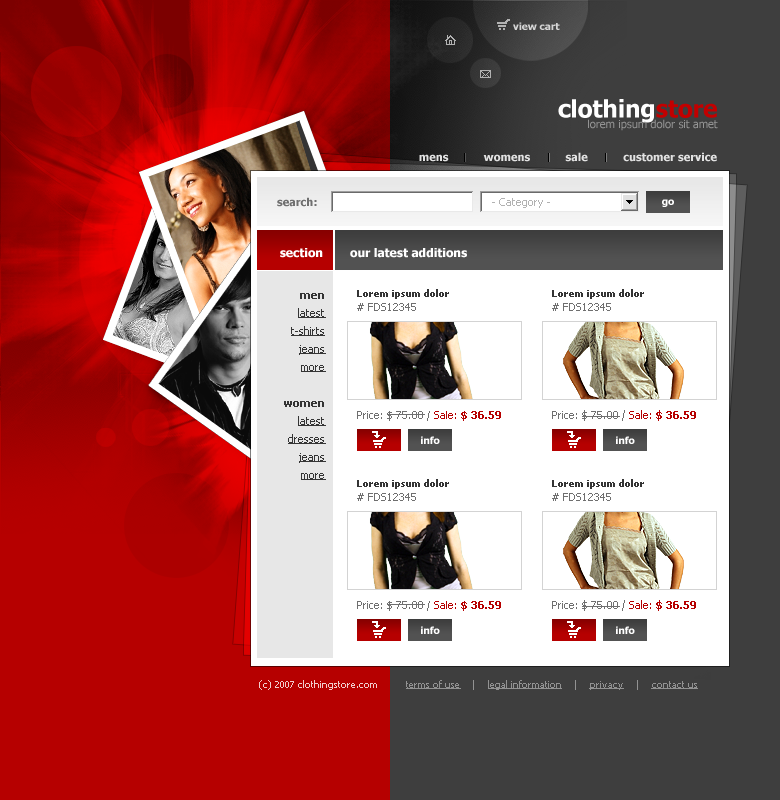
<style>
.page{position:relative;width:780px;height:800px;background:#ffffff}
.page>*{position:absolute;margin:0}
.t1{font:10px "Tahoma-Bold";color:#d5d5d5}
.t2{font:24px "Tahoma-Bold";color:#ffffff}
.t3{font:24px "Tahoma-Bold";color:#c20000}
.t4{font:11px "Tahoma";color:#949494}
.t5{font:11px "Tahoma-Bold";color:#e2e2e2}
.t6{font:11px "Tahoma-Bold";color:#6f6f6f}
.t7{font:11px "Tahoma";color:#b2b2b2}
.t8{font:10px "Tahoma-Bold";color:#ffffff}
.t9{font:12px "Tahoma-Bold";color:#ffffff}
.t10{font:11px/18px "Tahoma";color:#343434;text-decoration:underline}
.t11{font:11px/18px "Tahoma-Bold";color:#343434}
.t12{font:10px/14px "Tahoma-Bold";color:#343434}
.t13{font:11px/14px "Tahoma";color:#6f6f6f}
.t14{font:11px "Tahoma";color:#6f6f6f}
.t15{font:11px "Tahoma";color:#b60000}
.t16{font:11px "Tahoma-Bold";color:#b60000}
.t17{font:10px "Tahoma";color:#f0cccc}
.t18{font:10px "Tahoma";color:#929292;text-decoration:underline}
.t19{font:10px "Tahoma";color:#929292}
</style>
<div class="page">
<p class="t1" style="left:513px;top:22px;width:47px;height:8px">view cart</p>
<p class="t2" style="left:558px;top:99px;width:159px;height:24px">clothing<span class="t3">store</span></p>
<p class="t4" style="left:588px;top:119px;width:130px;height:12px">lorem ipsum dolor sit amet</p>
<p class="t5" style="left:419px;top:152px;width:298px;height:10px">mens           womens           sale           customer service</p>
<p class="t6" style="left:277px;top:197px;width:40px;height:10px">search:</p>
<p class="t7" style="left:492px;top:198px;width:58px;height:10px">- Category -</p>
<p class="t8" style="left:662px;top:199px;width:12px;height:8px">go</p>
<p class="t9" style="left:280px;top:248px;width:43px;height:10px">section</p>
<p class="t9" style="left:350px;top:248px;width:117px;height:10px">our latest additions</p>
<p class="t10" style="left:284px;top:293px;width:42px;height:187px;text-align:right"><span class="t11">men<br></span>latest<br>t-shirts<br>jeans<br>more<br><br><span class="t11">women<br></span>latest<br>dresses<br>jeans<br>more</p>
<p class="t12" style="left:357px;top:289px;width:92px;height:22px">Lorem ipsum dolor<br><span class="t13"># FDS12345</span></p>
<p class="t12" style="left:552px;top:289px;width:92px;height:22px">Lorem ipsum dolor<br><span class="t13"># FDS12345</span></p>
<p class="t14" style="left:357px;top:411px;width:144px;height:10px">Price: $ 75.00 / <span class="t15">Sale: </span><span class="t16">$ 36.59</span></p>
<p class="t14" style="left:552px;top:410px;width:144px;height:11px">Price: $ 75.00 / <span class="t15">Sale: </span><span class="t16">$ 36.59</span></p>
<p class="t8" style="left:421px;top:436px;width:19px;height:8px">info</p>
<p class="t8" style="left:616px;top:436px;width:19px;height:8px">info</p>
<p class="t12" style="left:357px;top:479px;width:92px;height:22px">Lorem ipsum dolor<br><span class="t13"># FDS12345</span></p>
<p class="t12" style="left:552px;top:479px;width:92px;height:22px">Lorem ipsum dolor<br><span class="t13"># FDS12345</span></p>
<p class="t14" style="left:357px;top:601px;width:144px;height:10px">Price: $ 75.00 / <span class="t15">Sale: </span><span class="t16">$ 36.59</span></p>
<p class="t14" style="left:552px;top:600px;width:144px;height:11px">Price: $ 75.00 / <span class="t15">Sale: </span><span class="t16">$ 36.59</span></p>
<p class="t8" style="left:421px;top:626px;width:19px;height:8px">info</p>
<p class="t8" style="left:616px;top:626px;width:19px;height:8px">info</p>
<p class="t17" style="left:259px;top:680px;width:118px;height:10px">(c) 2007 clothingstore.com</p>
<p class="t18" style="left:406px;top:680px;width:292px;height:10px">terms of use<span class="t19">    |    </span>legal information<span class="t19">    |    </span>privacy<span class="t19">    |    </span>contact us</p>
</div>
